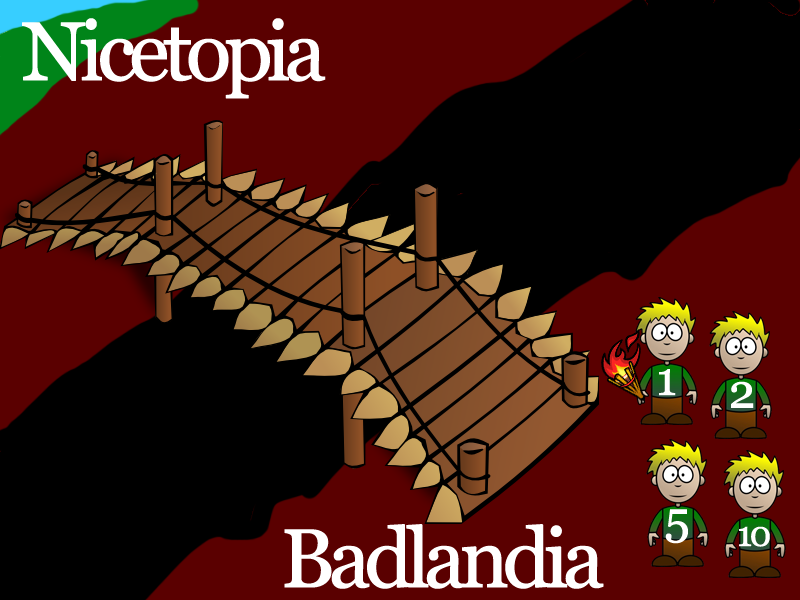
<style>
.page{position:relative;width:800px;height:600px;background:#000000}
.page>*{position:absolute;margin:0}
.t1{font:83.1px "Georgia";letter-spacing:-0.1em;color:#ffffff;font-weight:bold}
.t2{font:47.5px "Georgia";letter-spacing:-0.1em;color:#ffffff;font-weight:bold}
.t3{font:35.6px "Georgia";letter-spacing:-0.1em;color:#ffffff;font-weight:bold}
</style>
<div class="page">
<p class="t1" style="left:22px;top:18px;width:304px;height:81px">Nicetopia</p>
<p class="t2" style="left:659px;top:369px;width:17px;height:27px">1</p>
<p class="t2" style="left:731px;top:381px;width:23px;height:27px">2</p>
<p class="t2" style="left:665px;top:509px;width:23px;height:35px">5</p>
<p class="t1" style="left:284px;top:524px;width:320px;height:65px">Badlandia</p>
<p class="t3" style="left:739px;top:526px;width:31px;height:21px">10</p>
</div>
